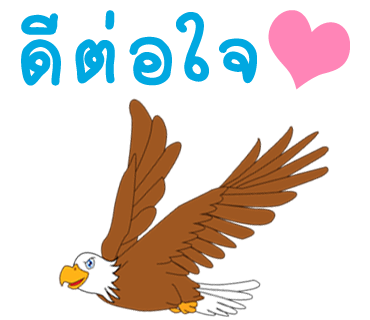
<style>
.page{position:relative;width:370px;height:320px;background:#ffffff}
.page>*{position:absolute;margin:0}
.t1{font:126px "2005_iannnnnMTV";letter-spacing:0.025em;color:#00a8e1;scale:1.06 1}
</style>
<div class="page">
<p class="t1" style="left:21px;top:10px;width:236px;height:76px">ดีต่อใจ</p>
</div>
